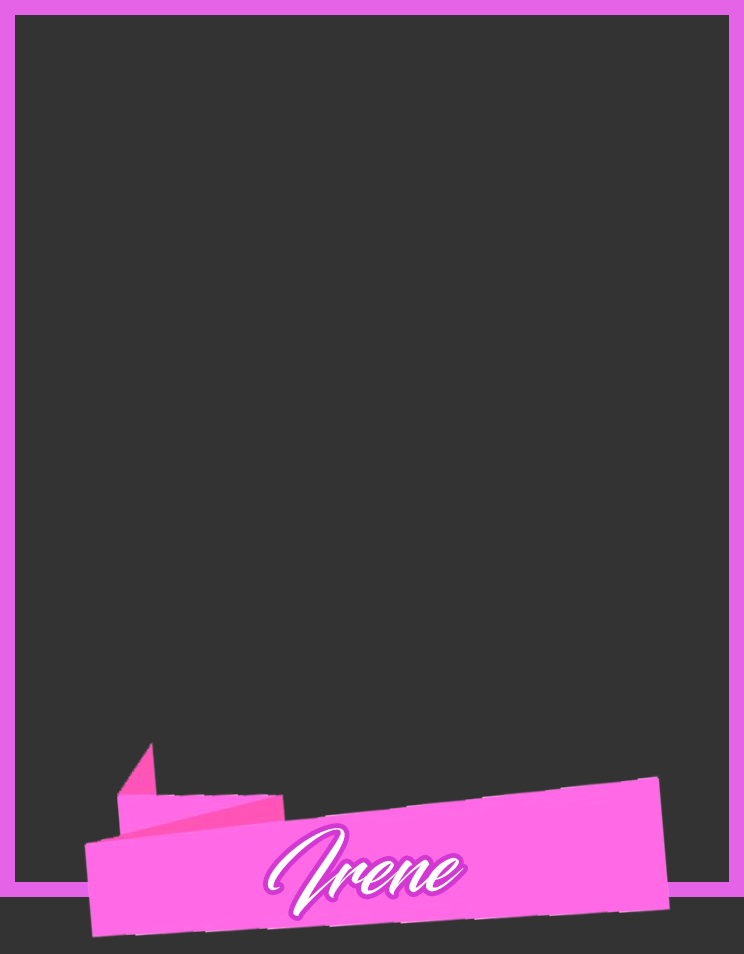
<style>
.page{position:relative;width:744px;height:954px;background:#333333}
.page>*{position:absolute;margin:0}
.t1{font:80.2px "Blacksword";color:#ffffff}
</style>
<div class="page">
<p class="t1" style="left:267px;top:828px;width:197px;height:88px;rotate:-3deg">Irene</p>
</div>
